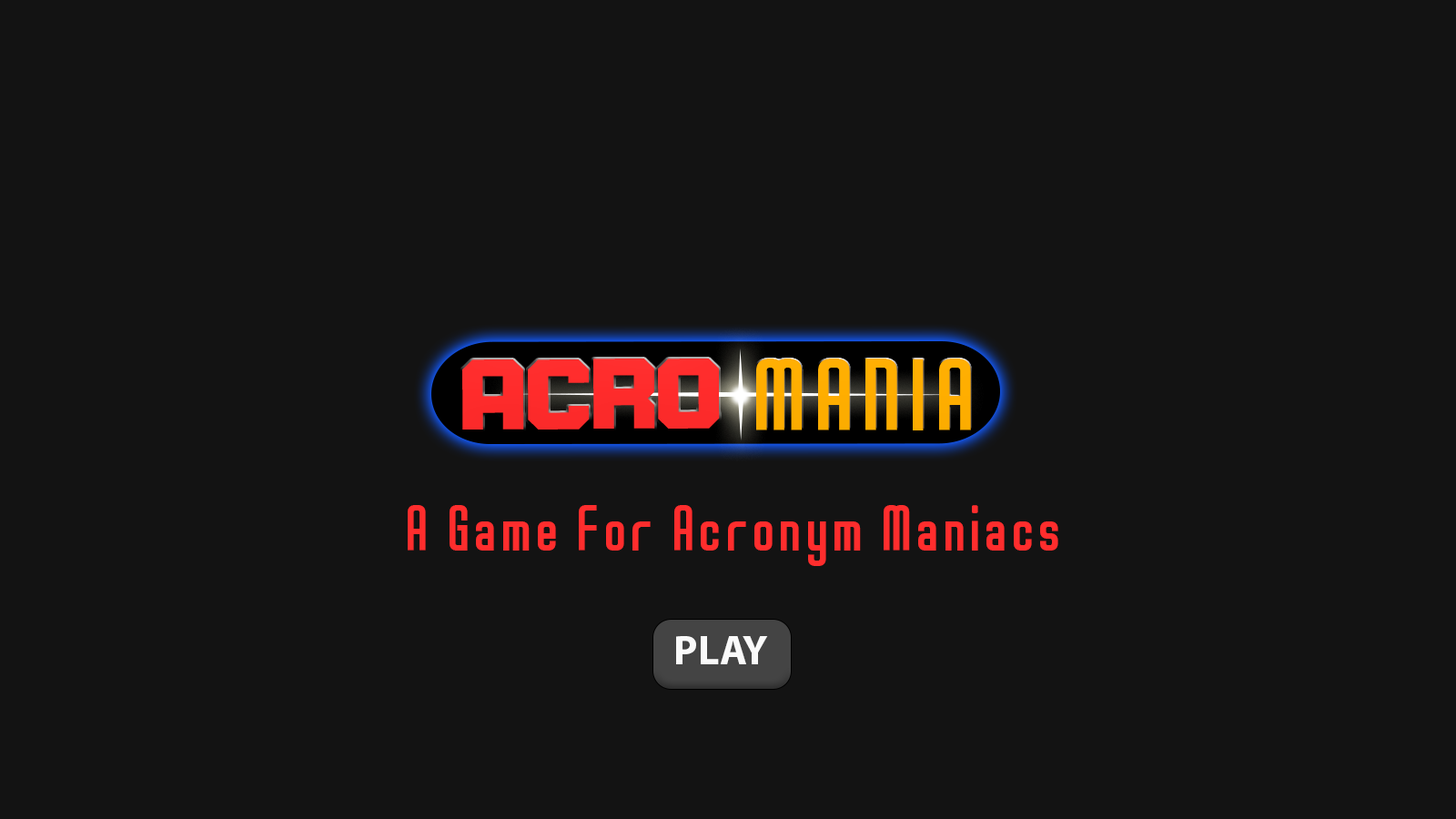
<style>
.page{position:relative;width:1456px;height:819px;background:#131313}
.page>*{position:absolute;margin:0}
.t1{font:106.2px "D3-Egoistism";color:#ff2b2b;scale:0.54 1}
.t2{font:79.6px "D3-Smartism-TypeA";letter-spacing:0.1em;color:#ffae00;scale:1.13 1}
.t3{font:50.4px "D3-Smartism-TypeA";letter-spacing:0.1em;color:#ff2d2d}
.t4{font:41.7px "MyriadPro-Bold";color:#fafafa}
</style>
<div class="page">
<p class="t1" style="left:462px;top:359px;width:258px;height:71px">ACRO</p>
<p class="t2" style="left:756px;top:359px;width:215px;height:71px">MANIA</p>
<p class="t3" style="left:408px;top:505px;width:650px;height:61px">A Game For Acronym Maniacs</p>
<p class="t4" style="left:676px;top:636px;width:92px;height:28px">PLAY</p>
</div>
